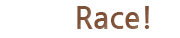
<style>
.page{position:relative;width:180px;height:38px;background:#ffffff}
.page>*{position:absolute;margin:0}
.t1{font:30px "NanumGothicBold";color:#7e5035}
</style>
<div class="page">
<p class="t1" style="left:77px;top:6px;width:73px;height:23px">Race!</p>
</div>
